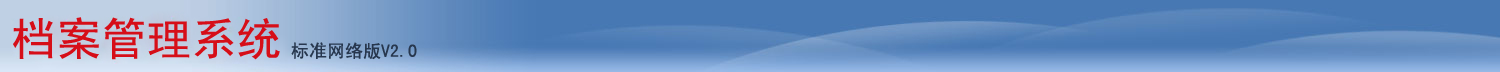
<style>
.page{position:relative;width:1500px;height:72px}
.page>*{position:absolute;margin:0}
.t1{font:45px "SimHei";color:#d60e18}
.t2{font:18px "SimHei";color:#27374e}
</style>
<div class="page">
<p class="t1" style="left:13px;top:17px;width:267px;height:43px">档案管理系统</p>
<p class="t2" style="left:291px;top:42px;width:126px;height:18px">标准网络版V2.0</p>
</div>
